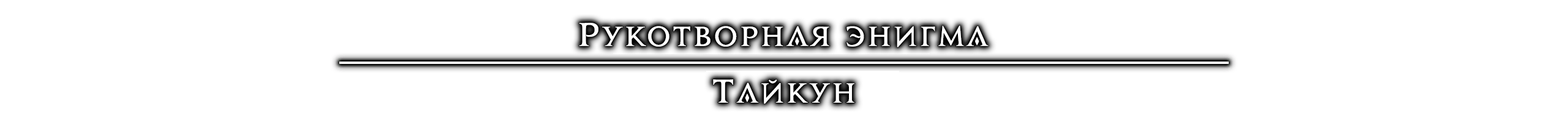
<style>
.page{position:relative;width:1568px;height:123px;background:#ffffff}
.page>*{position:absolute;margin:0}
.t1{font:24.8px "JupiterProRus-Bold";letter-spacing:0.12em;color:#ffffff}
.t2{font:29.6px "JupiterProRus-Bold";letter-spacing:0.12em;color:#ffffff}
</style>
<div class="page">
<p class="t1" style="left:579px;top:23px;width:410px;height:24px"><span class="t2">Р</span>укотворнAя энигмA</p>
<p class="t1" style="left:713px;top:79px;width:141px;height:25px"><span class="t2">Т</span>Aйкун</p>
</div>
